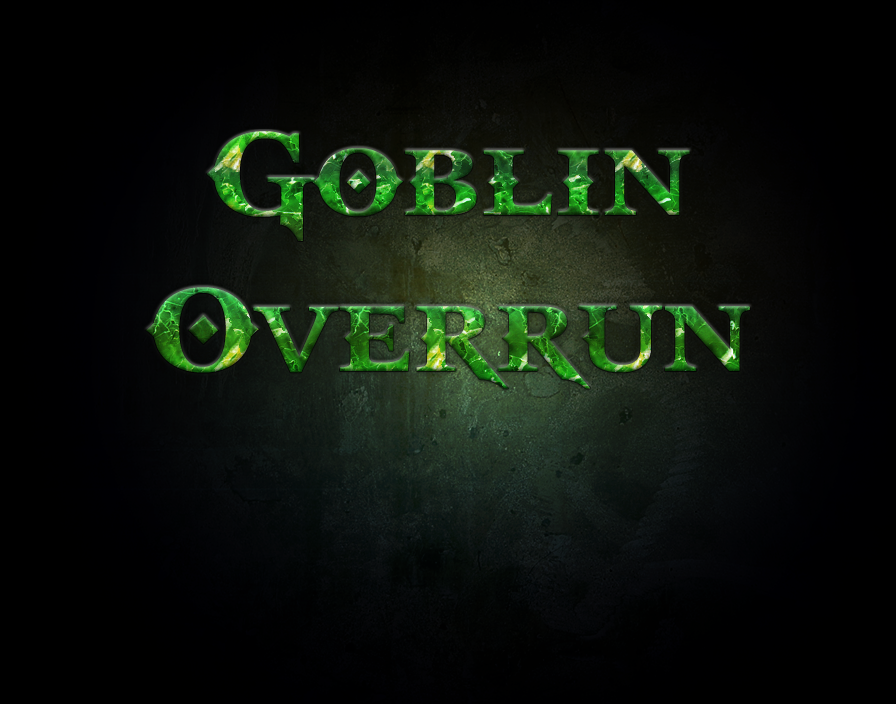
<style>
.page{position:relative;width:896px;height:704px}
.page>*{position:absolute;margin:0}
.t1{font:130px "GodOfWar"}
</style>
<div class="page">
<p class="t1" style="left:146px;top:131px;width:604px;height:258px;text-align:center">Goblin<br>Overrun</p>
</div>
